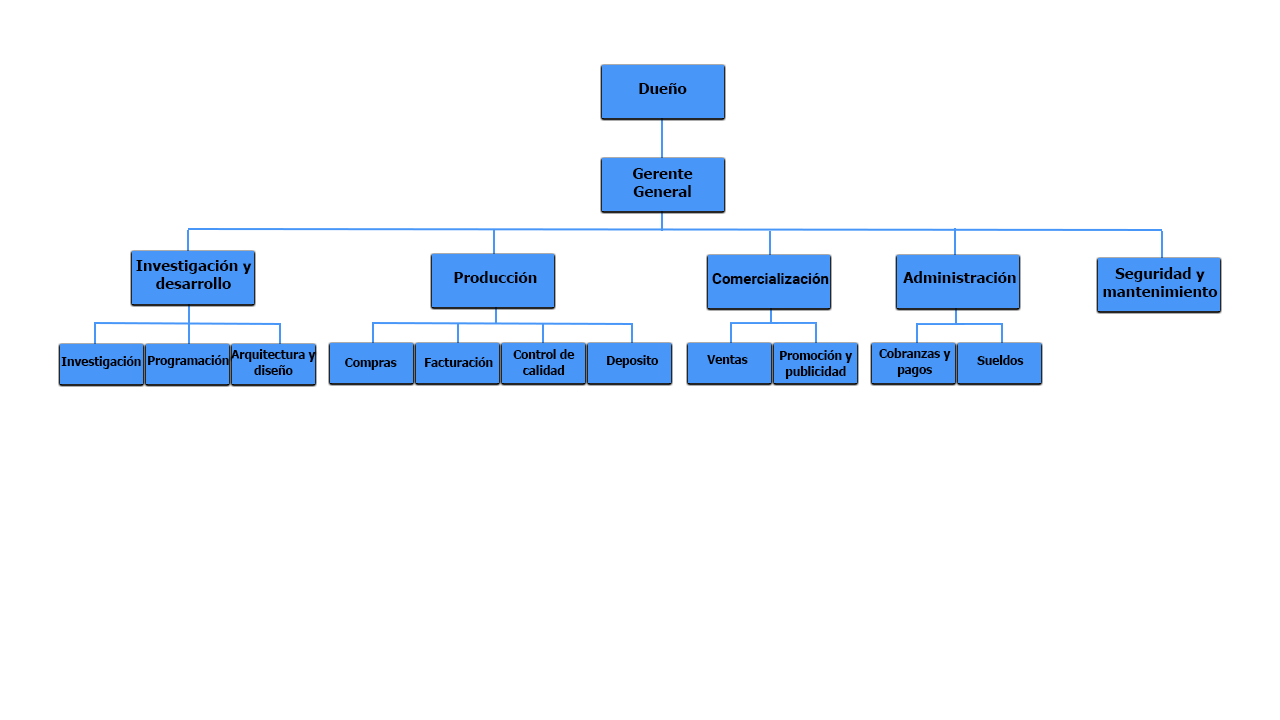
<style>
.page{position:relative;width:1280px;height:720px;background:#ffffff}
.page>*{position:absolute;margin:0}
.t1{font:15px "Tahoma-Bold";color:#000000}
.t2{font:15px "Roboto-Bold";color:#000000}
.t3{font:13px "Tahoma-Bold";color:#000000;scale:0.9 1}
</style>
<div class="page">
<p class="t1" style="left:639px;top:83px;width:48px;height:11px">Dueño</p>
<p class="t1" style="left:633px;top:168px;width:60px;height:29px;text-align:center">Gerente<br>General</p>
<p class="t1" style="left:136px;top:260px;width:116px;height:29px;text-align:center">Investigación y desarrollo</p>
<p class="t1" style="left:1103px;top:267px;width:115px;height:30px;text-align:center">Seguridad y mantenimiento</p>
<p class="t1" style="left:454px;top:271px;width:83px;height:12px">Producción</p>
<p class="t2" style="left:712px;top:273px;width:117px;height:11px">Comercialización</p>
<p class="t1" style="left:903px;top:271px;width:113px;height:12px">Administración</p>
<p class="t3" style="left:231px;top:349px;width:85px;height:26px;text-align:center">Arquitectura y diseño</p>
<p class="t3" style="left:513px;top:349px;width:62px;height:26px;text-align:center">Control de calidad</p>
<p class="t3" style="left:780px;top:350px;width:73px;height:29px;text-align:center">Promoción y publicidad</p>
<p class="t3" style="left:879px;top:348px;width:72px;height:29px;text-align:center">Cobranzas y pagos</p>
<p class="t3" style="left:61px;top:356px;width:80px;height:13px">Investigación</p>
<p class="t3" style="left:148px;top:355px;width:81px;height:13px">Programación</p>
<p class="t3" style="left:345px;top:358px;width:52px;height:12px">Compras</p>
<p class="t3" style="left:425px;top:357px;width:68px;height:10px">Facturación</p>
<p class="t3" style="left:607px;top:355px;width:52px;height:13px">Deposito</p>
<p class="t3" style="left:707px;top:355px;width:41px;height:9px">Ventas</p>
<p class="t3" style="left:977px;top:355px;width:47px;height:10px">Sueldos</p>
</div>
